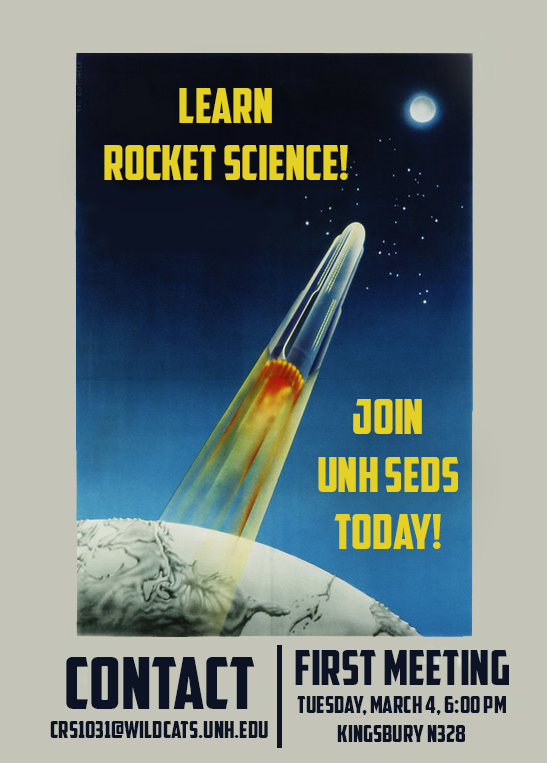
<style>
.page{position:relative;width:547px;height:763px;background:#c4c5b8}
.page>*{position:absolute;margin:0}
.t1{font:48px "AmericanCaptain";color:#e5d124}
.t2{font:24px "AmericanCaptain";color:#0c1325}
.t3{font:48px "AmericanCaptain";color:#0c1325}
.t4{font:72px "AmericanCaptain";color:#0c1325}
</style>
<div class="page">
<p class="t1" style="left:104px;top:88px;width:244px;height:92px;text-align:center">Learn<br>Rocket Science!</p>
<p class="t1" style="left:318px;top:399px;width:140px;height:150px;text-align:center">JOIN<br>UNH SEDS<br>Today!</p>
<p class="t2" style="left:295px;top:650px;width:214px;height:92px;text-align:center"><span class="t3">First Meeting<br></span>Tuesday, March 4, 6:00 pm<br>Kingsbury N328</p>
<p class="t2" style="left:50px;top:657px;width:218px;height:81px;text-align:center"><span class="t4">Contact<br></span>crs1031@wildcats.unh.edu</p>
</div>
